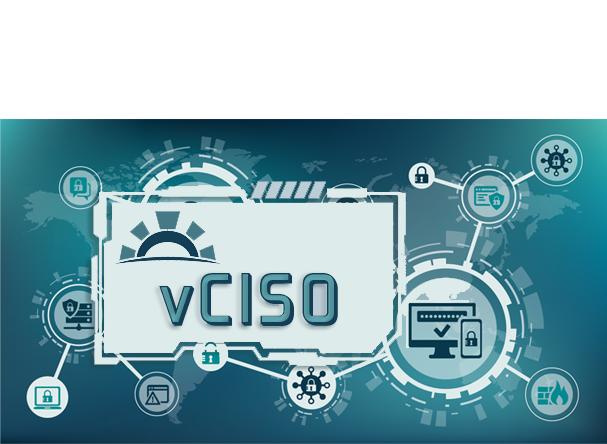
<style>
.page{position:relative;width:607px;height:444px;background:#ffffff}
.page>*{position:absolute;margin:0}
.t1{font:72px "ForgottenFuturistShadow-Regular";letter-spacing:0.05em;color:#133e56}
</style>
<div class="page">
<p class="t1" style="left:159px;top:273px;width:179px;height:53px">vCISO</p>
</div>
